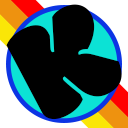
<style>
.page{position:relative;width:128px;height:128px;background:#000000}
.page>*{position:absolute;margin:0}
.t1{font:150px "Modak";color:#000000}
</style>
<div class="page">
<p class="t1" style="left:6px;top:4px;width:116px;height:116px;rotate:-28deg">K</p>
</div>
